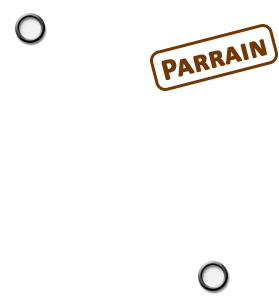
<style>
.page{position:relative;width:279px;height:300px;background:#ffffff}
.page>*{position:absolute;margin:0}
.t1{font:30px "Calibri-Bold";color:#723805;font-variant:small-caps;font-weight:bold}
</style>
<div class="page">
<p class="t1" style="left:161px;top:39px;width:106px;height:41px;rotate:-14deg">Parrain</p>
</div>
